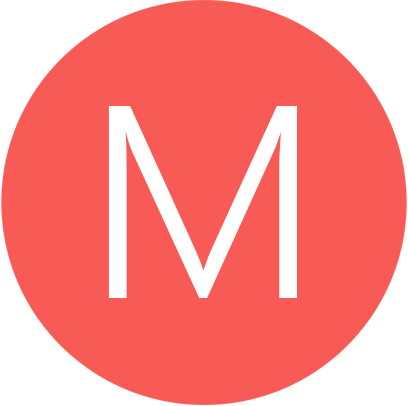
<style>
.page{position:relative;width:408px;height:406px;background:#f85a56}
.page>*{position:absolute;margin:0}
.t1{font:274.1px "SegoeUI-Semilight";color:#ffffff}
</style>
<div class="page">
<p class="t1" style="left:108px;top:106px;width:189px;height:192px">M</p>
</div>
